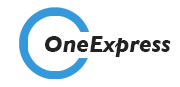
<style>
.page{position:relative;width:180px;height:87px;background:#ffffff}
.page>*{position:absolute;margin:0}
.t1{font:23px "GillSans-BoldItalic";color:#222222}
</style>
<div class="page">
<p class="t1" style="left:45px;top:36px;width:126px;height:21px">OneExpress</p>
</div>
